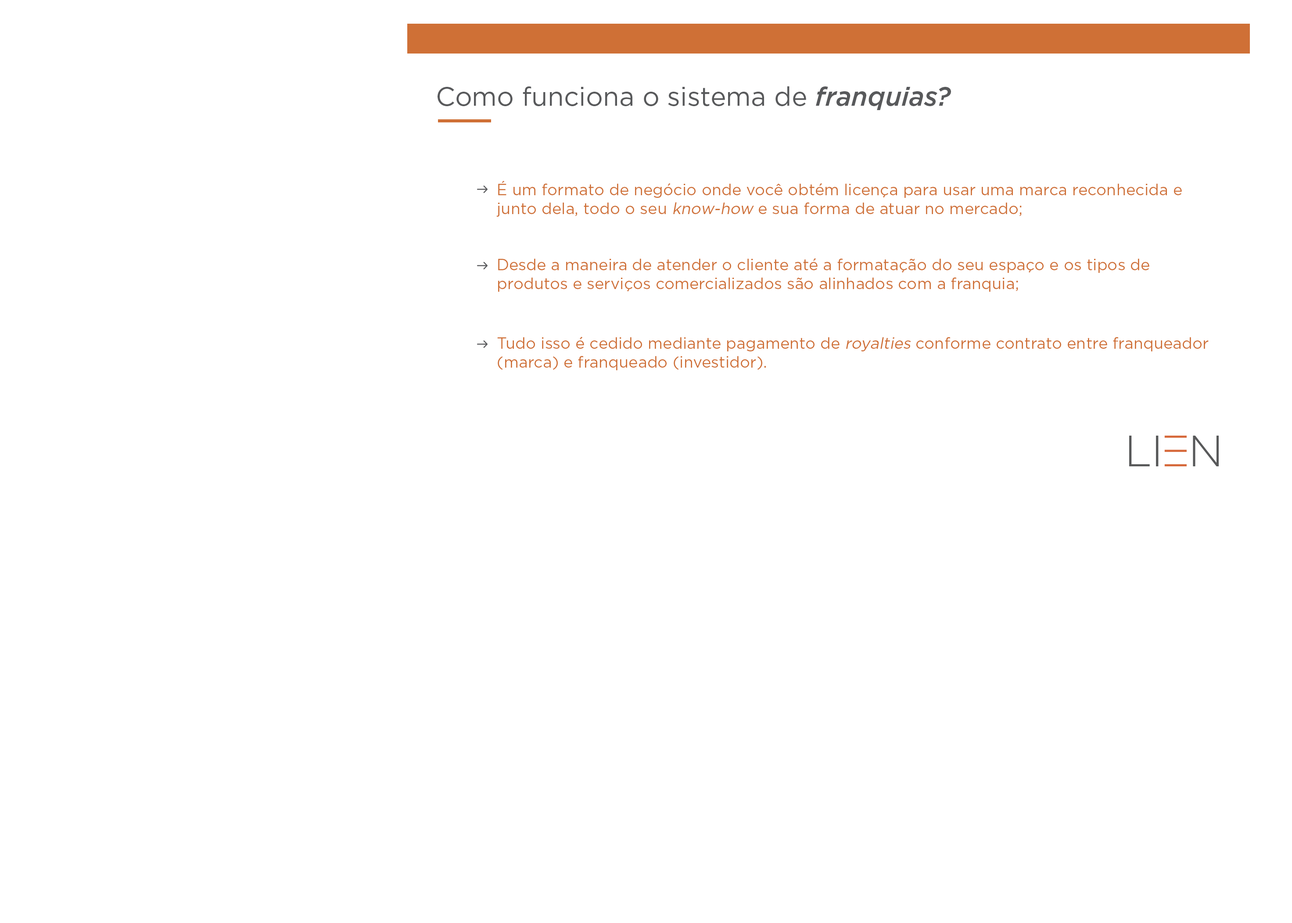
<style>
.page{position:relative;width:1292px;height:923px;background:#ffffff}
.page>*{position:absolute;margin:0}
.t1{font:26.3px "Gotham-Book";color:#58595b}
.t2{font:26.3px "Gotham-MediumItalic";color:#58595b}
.t3{font:15.8px "Gotham-Book";color:#cf7036}
.t4{font:15.8px "Gotham-Book";color:#cf7036;font-style:italic}
</style>
<div class="page">
<p class="t1" style="left:437px;top:86px;width:514px;height:24px">Como funciona o sistema de <span class="t2">franquias?</span></p>
<p class="t3" style="left:496px;top:181px;width:686px;height:36px">É um formato de negócio onde você obtém licença para usar uma marca reconhecida e junto dela, todo o seu <span class="t4">know-how</span> e sua forma de atuar no mercado;</p>
<p class="t3" style="left:498px;top:258px;width:651px;height:34px">Desde a maneira de atender o cliente até a formatação do seu espaço e os tipos de produtos e serviços comercializados são alinhados com a franquia;</p>
<p class="t3" style="left:497px;top:337px;width:711px;height:33px">Tudo isso é cedido mediante pagamento de <span class="t4">royalties</span> conforme contrato entre franqueador (marca) e franqueado (investidor).</p>
</div>
